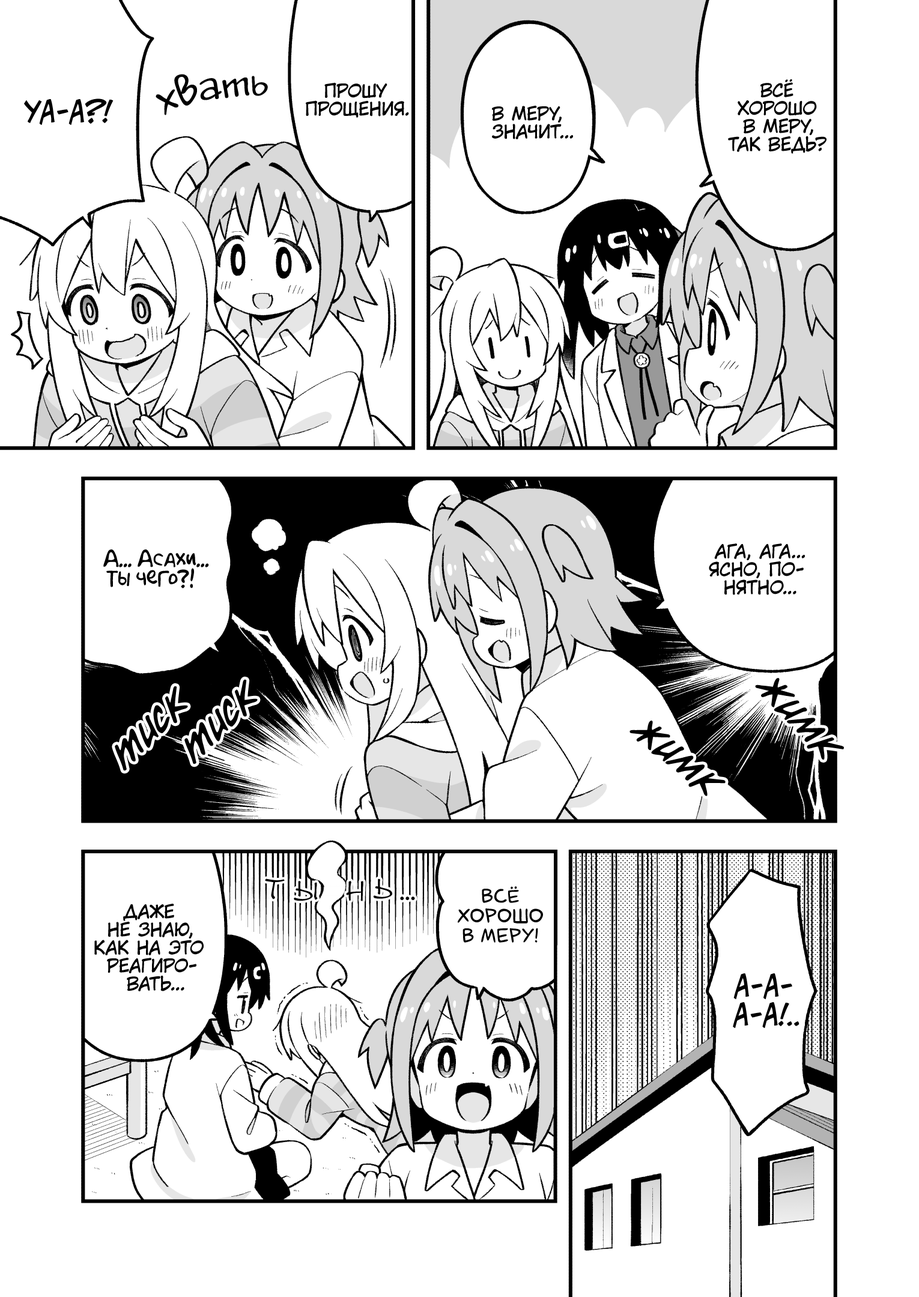
<style>
.page{position:relative;width:919px;height:1297px;background:#ffffff}
.page>*{position:absolute;margin:0}
.t1{font:39.6px "JakobCTT-Regular";color:#000000}
.t2{font:18px "KuraiVoice2";color:#000000;text-transform:uppercase}
.t3{font:28.8px "v_CCJeffCampbell";color:#000000;text-transform:uppercase}
.t4{font:19.8px "AkbarPlain";color:#000000}
.t5{font:45.1px "v_CCDearDiary";color:#000000}
.t6{font:28.8px "DSNote";color:#000000;text-transform:uppercase}
.t7{font:19.8px "laCartoonerie";color:#000000;text-transform:uppercase}
.t8{font:21.6px "DSNote";color:#000000;text-transform:uppercase}
.t9{font:21.6px "v_CCJeffCampbell";color:#000000;text-transform:uppercase}
</style>
<div class="page">
<p class="t1" style="left:156px;top:74px;width:112px;height:41px;rotate:-10deg">хвать</p>
<p class="t2" style="left:306px;top:82px;width:103px;height:36px;text-align:center">Прошу<br>прощения.</p>
<p class="t2" style="left:728px;top:79px;width:99px;height:75px;text-align:center">Всё<br>хорошо<br>в меру,<br>так ведь?</p>
<p class="t3" style="left:24px;top:99px;width:90px;height:26px">Уа-а?!</p>
<p class="t2" style="left:492px;top:106px;width:81px;height:33px;text-align:center">В меру,<br>значит...</p>
<p class="t2" style="left:709px;top:544px;width:96px;height:51px;text-align:center">Ага, ага...<br>Ясно, по-<br>нятно...</p>
<p class="t4" style="left:103px;top:550px;width:106px;height:39px;text-align:center">А... Асахи...<br>Ты чего?!</p>
<p class="t5" style="left:755px;top:678px;width:89px;height:82px;rotate:48deg">жимк</p>
<p class="t5" style="left:630px;top:721px;width:96px;height:76px;rotate:40deg">жимк</p>
<p class="t6" style="left:265px;top:879px;width:20px;height:21px">т</p>
<p class="t6" style="left:294px;top:881px;width:24px;height:21px">ы</p>
<p class="t6" style="left:346px;top:881px;width:17px;height:21px">н</p>
<p class="t6" style="left:373px;top:879px;width:19px;height:20px">ь</p>
<p class="t7" style="left:458px;top:887px;width:85px;height:56px;text-align:center">Всё<br>хорошо<br>в меру!</p>
<p class="t2" style="left:94px;top:904px;width:110px;height:88px;text-align:center">Даже<br>не знаю,<br>как на это<br>реагиро-<br>вать...</p>
<p class="t8" style="left:400px;top:897px;width:15px;height:3px">...</p>
<p class="t3" style="left:733px;top:974px;width:67px;height:54px;text-align:center">А-а-<br>а-а!<span class="t9">..</span></p>
</div>
